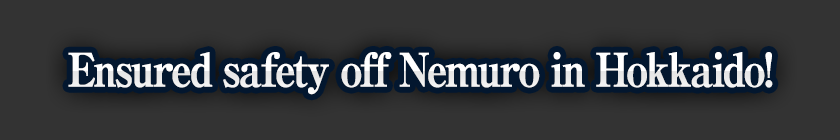
<style>
.page{position:relative;width:840px;height:140px;background:#333333}
.page>*{position:absolute;margin:0}
.t1{font:46px "RyuminPro-ExBold";letter-spacing:-0.08em;color:#ffffff;font-weight:bold;scale:0.9 1}
</style>
<div class="page">
<p class="t1" style="left:68px;top:52px;width:705px;height:43px">Ensured safety off Nemuro in Hokkaido!</p>
</div>
